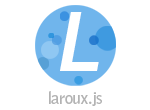
<style>
.page{position:relative;width:150px;height:110px;background:#ffffff}
.page>*{position:absolute;margin:0}
.t1{font:81.7px "Trebuchet-BoldItalic";letter-spacing:-0.03em;color:#ffffff}
.t2{font:16.3px "BellGothicStd-Bold";letter-spacing:-0.03em;color:#b3b3b3}
</style>
<div class="page">
<p class="t1" style="left:60px;top:12px;width:39px;height:59px">L</p>
<p class="t2" style="left:49px;top:91px;width:53px;height:15px">laroux.js</p>
</div>
